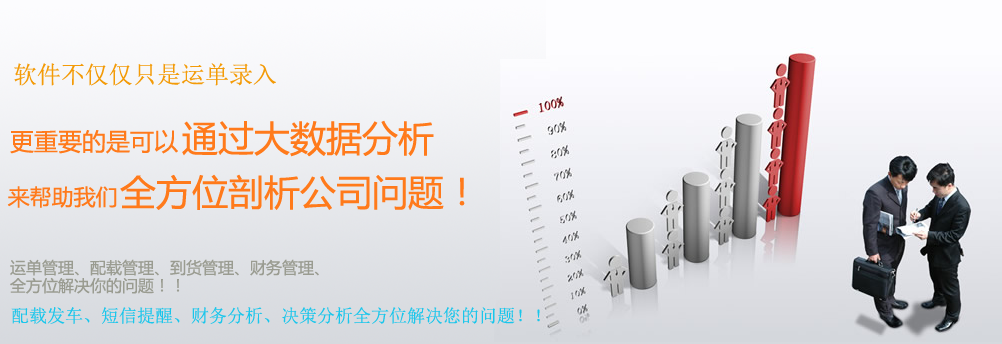
<style>
.page{position:relative;width:1002px;height:344px}
.page>*{position:absolute;margin:0}
.t1{font:24px "SimSun";color:#f39b08}
.t2{font:36px "MicrosoftYaHei";color:#ff7a1b}
.t3{font:24px "MicrosoftYaHei";color:#ff7a1b}
.t4{font:22px "MicrosoftYaHei";color:#ff7a1b}
.t5{font:16px/18px "MicrosoftYaHei";color:#9a9c91}
.t6{font:18px "SimSun";color:#1bc6eb}
</style>
<div class="page">
<p class="t1" style="left:14px;top:63px;width:262px;height:23px">软件不仅仅只是运单录入</p>
<p class="t2" style="left:182px;top:120px;width:252px;height:37px">通过大数据分析</p>
<p class="t3" style="left:10px;top:130px;width:168px;height:24px">更重要的是可以</p>
<p class="t2" style="left:120px;top:174px;width:345px;height:36px">全方位剖析公司问题！</p>
<p class="t4" style="left:7px;top:186px;width:110px;height:22px">来帮助我们</p>
<p class="t5" style="left:10px;top:259px;width:309px;height:35px">运单管理、配载管理、到货管理、财务管理、<br>全方位解决你的问题！！</p>
<p class="t6" style="left:11px;top:307px;width:529px;height:17px">配载发车、短信提醒、财务分析、决策分析全方位解决您的问题！！</p>
</div>
